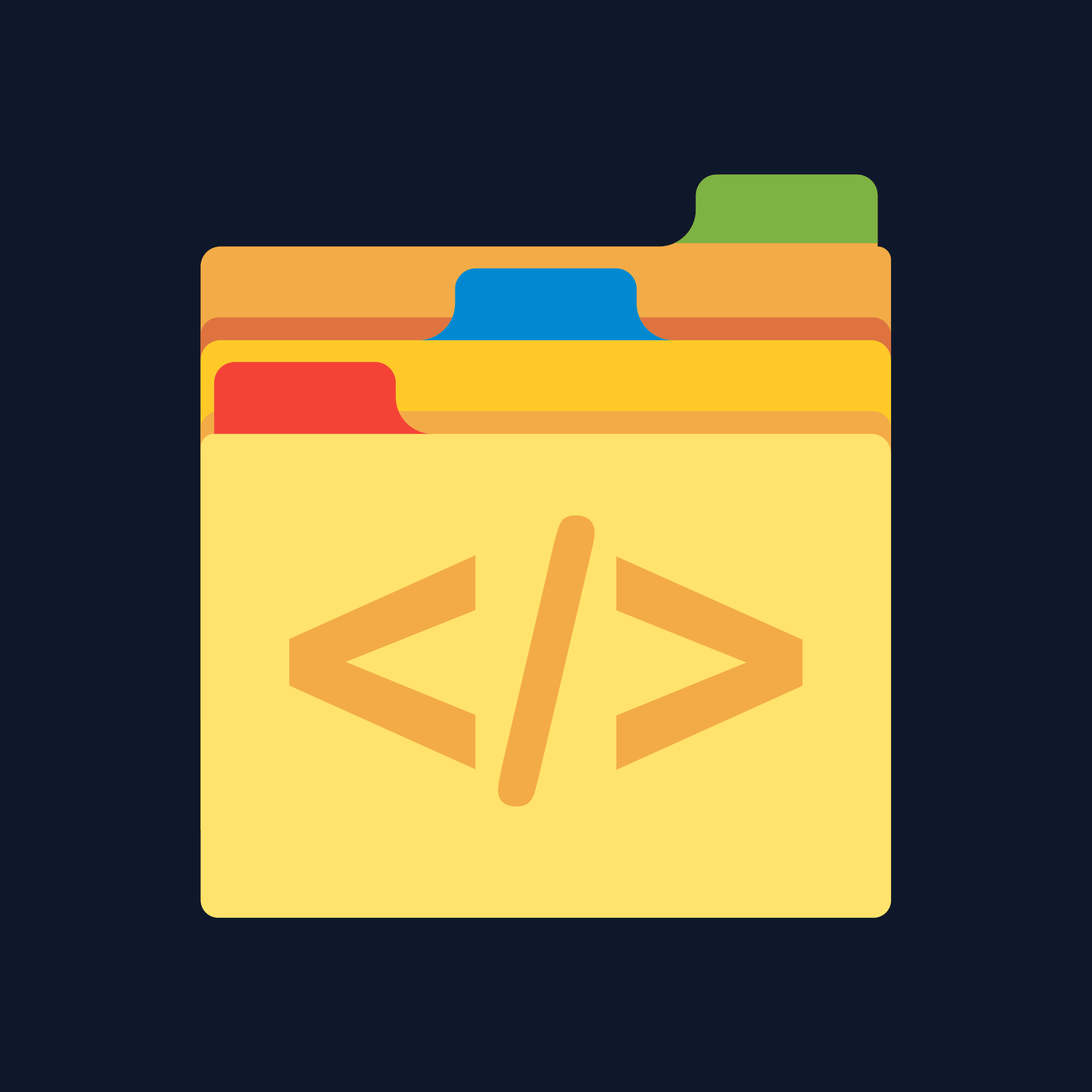
<style>
.page{position:relative;width:1092px;height:1092px;background:#0f182a}
.page>*{position:absolute;margin:0}
.t1{font:392.9px "ArialRoundedMTBold";color:#f3ab47;scale:0.96 1}
</style>
<div class="page">
<p class="t1" style="left:289px;top:515px;width:514px;height:291px">&lt;/&gt;</p>
</div>
